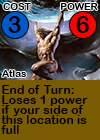
<style>
.page{position:relative;width:100px;height:140px;background:#795b01}
.page>*{position:absolute;margin:0}
.t1{font:9.7px "ArialRoundedMTBold";letter-spacing:0.01em;color:#000000}
.t2{font:24px "ArialRoundedMTBold";letter-spacing:0.01em;color:#000000}
.t3{font:12px/10px "ArialRoundedMTBold";letter-spacing:0.01em;color:#000000}
</style>
<div class="page">
<p class="t1" style="left:3px;top:3px;width:28px;height:7px">COST</p>
<p class="t1" style="left:60px;top:3px;width:38px;height:7px">POWER</p>
<p class="t2" style="left:8px;top:16px;width:13px;height:17px">3</p>
<p class="t2" style="left:76px;top:16px;width:13px;height:17px">6</p>
<p class="t1" style="left:2px;top:70px;width:25px;height:7px">Atlas</p>
<p class="t3" style="left:1px;top:85px;width:87px;height:49px">End of Turn:<br>Loses 1 power<br>if your side of<br>this location is<br>full</p>
</div>
